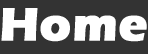
<style>
.page{position:relative;width:148px;height:54px;background:#333333}
.page>*{position:absolute;margin:0}
.t1{font:48px "ErasITC-Bold";color:#ffffff;font-weight:bold}
</style>
<div class="page">
<p class="t1" style="left:1px;top:8px;width:146px;height:34px">Home</p>
</div>
